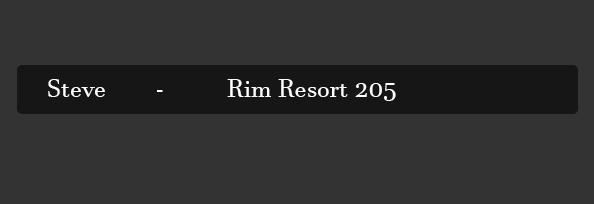
<style>
.page{position:relative;width:594px;height:204px;background:#333333}
.page>*{position:absolute;margin:0}
.t1{font:25px "JavaneseText";color:#ffffff}
</style>
<div class="page">
<p class="t1" style="left:48px;top:79px;width:348px;height:22px">Steve  -  Rim Resort 205</p>
</div>
